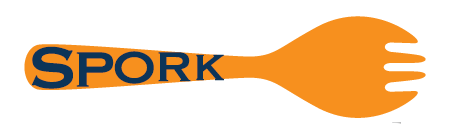
<style>
.page{position:relative;width:450px;height:125px;background:#ffffff}
.page>*{position:absolute;margin:0}
.t1{font:78px "Copperplate";color:#0c3458}
.t2{font:65px "Copperplate";color:#0c3458}
.t3{font:60px "Copperplate";color:#0c3458}
.t4{font:55px "Copperplate";color:#0c3458}
.t5{font:48px "Copperplate";color:#0c3458}
</style>
<div class="page">
<p class="t1" style="left:31px;top:46px;width:42px;height:43px">S</p>
<p class="t2" style="left:76px;top:52px;width:38px;height:35px">P</p>
<p class="t3" style="left:114px;top:51px;width:40px;height:33px">O</p>
<p class="t4" style="left:158px;top:52px;width:33px;height:30px">R</p>
<p class="t5" style="left:196px;top:54px;width:28px;height:27px">K</p>
</div>
